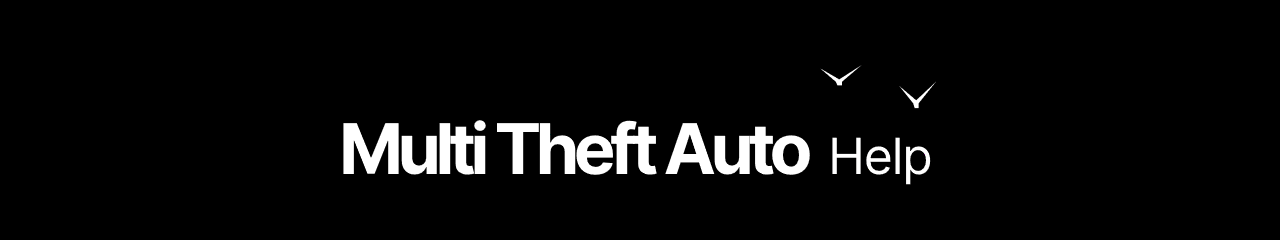
<style>
.page{position:relative;width:1280px;height:240px;background:#000000}
.page>*{position:absolute;margin:0}
.t1{font:70px "Inter-Bold";letter-spacing:-0.08em;color:#ffffff}
.t2{font:50px "Inter-Regular";letter-spacing:-0.025em;color:#ffffff}
</style>
<div class="page">
<p class="t1" style="left:343px;top:120px;width:467px;height:55px">Multi Theft Auto</p>
<p class="t2" style="left:832px;top:137px;width:99px;height:48px">Help</p>
</div>
